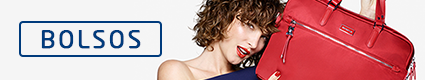
<style>
.page{position:relative;width:425px;height:80px;background:#f5f5f5}
.page>*{position:absolute;margin:0}
.t1{font:24px "NeoSansPro-Regular";letter-spacing:0.1em;color:#003b7c;font-weight:bold}
</style>
<div class="page">
<p class="t1" style="left:41px;top:30px;width:100px;height:19px">BOLSOS</p>
</div>
